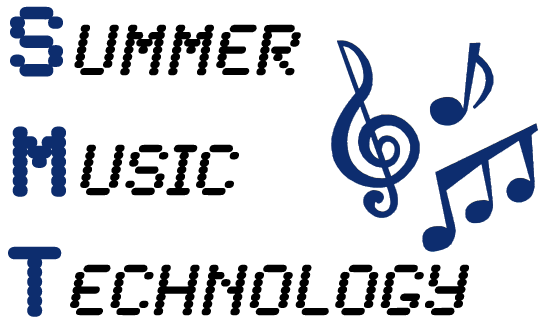
<style>
.page{position:relative;width:548px;height:335px;background:#ffffff}
.page>*{position:absolute;margin:0}
.t1{font:75px "SynchroLET";color:#000000;font-style:italic}
.t2{font:100px "SynchroLET";color:#0d2d6e;font-weight:bold}
</style>
<div class="page">
<p class="t1" style="left:8px;top:6px;width:461px;height:311px"><span class="t2">S</span>ummer<br><span class="t2">M</span>usic<br><span class="t2">T</span>echNology</p>
</div>
